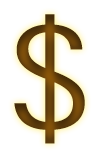
<style>
.page{position:relative;width:97px;height:156px;background:#ffffff}
.page>*{position:absolute;margin:0}
.t1{font:155px "AcuminConcept-CondensedLight";letter-spacing:0.025em;color:#633f0a;text-transform:uppercase;scale:1.3 1}
</style>
<div class="page">
<p class="t1" style="left:14px;top:14px;width:71px;height:130px">$</p>
</div>
